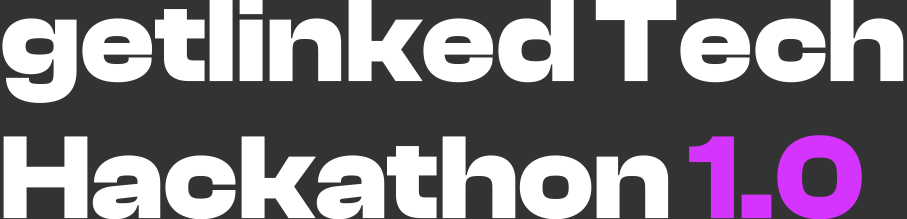
<style>
.page{position:relative;width:907px;height:219px;background:#333333}
.page>*{position:absolute;margin:0}
.t1{font:121.7px/137px "ClashDisplay-Bold";color:#ffffff}
.t2{font:121.7px/137px "ClashDisplay-Bold";color:#d434fe}
</style>
<div class="page">
<p class="t1" style="left:2px;top:0px;width:902px;height:220px">getlinked Tech<br>Hackathon <span class="t2">1.0</span></p>
</div>
